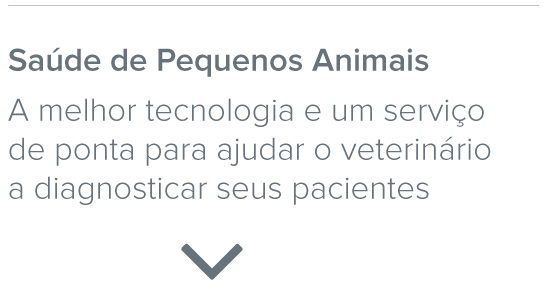
<style>
.page{position:relative;width:547px;height:289px;background:#ffffff}
.page>*{position:absolute;margin:0}
.t1{font:33px/39px "ProximaNova-Light";color:#68727b}
.t2{font:33px/50px "ProximaNova-Semibold";color:#68727b}
.t3{font:33px/50px "ProximaNova-Light";color:#68727b}
</style>
<div class="page">
<p class="t1" style="left:8px;top:47px;width:483px;height:158px"><span class="t2">Saúde de Pequenos Animais</span><span class="t3"><br>A melhor tecnologia e um serviço<br></span>de ponta para ajudar o veterinário<br>a diagnosticar seus pacientes</p>
</div>
